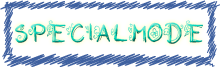
<style>
.page{position:relative;width:220px;height:67px;background:#ffffff}
.page>*{position:absolute;margin:0}
.t1{font:15px "Initialized"}
</style>
<div class="page">
<p class="t1" style="left:15px;top:20px;width:188px;height:24px">SPECIALMODE</p>
</div>
